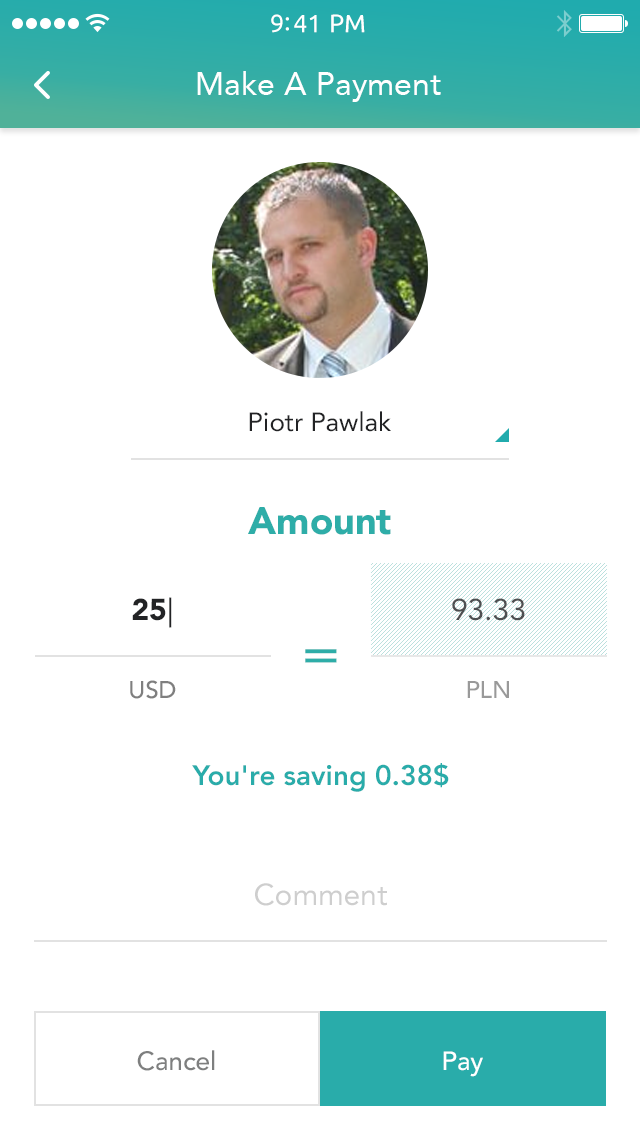
<style>
.page{position:relative;width:640px;height:1136px;background:#ffffff}
.page>*{position:absolute;margin:0}
.t1{font:25px "Ubuntu";color:#ffffff}
.t2{font:32px "Avenir-Roman";color:#ffffff}
.t3{font:26px "Avenir-Roman";color:#222325}
.t4{font:38px "Avenir-Black";color:#2eada8}
.t5{font:24px/78px "Avenir-Medium";color:#7f7f7f}
.t6{font:30px/78px "Avenir-Black";color:#222325}
.t7{font:30px/78px "Avenir-Roman";color:#222325}
.t8{font:30px/30px "Avenir-Roman"}
.t9{font:24px/78px "Avenir-Medium"}
.t10{font:60px "Avenir-Roman";color:#2eada8}
.t11{font:28px "Avenir-Heavy";color:#29acaa}
.t12{font:30px "Avenir-Roman";color:#cecece}
.t13{font:26px "Avenir-Medium";color:#7e7f7f}
.t14{font:26px "Avenir-Medium";color:#ffffff}
</style>
<div class="page">
<p class="t1" style="left:271px;top:14px;width:94px;height:19px">9:41 PM</p>
<p class="t2" style="left:197px;top:71px;width:244px;height:31px">Make A Payment</p>
<p class="t3" style="left:249px;top:411px;width:142px;height:21px">Piotr Pawlak</p>
<p class="t4" style="left:248px;top:507px;width:143px;height:28px">Amount</p>
<p class="t5" style="left:130px;top:597px;width:46px;height:102px;text-align:center"><span class="t6">25</span><span class="t7">|<br></span>USD</p>
<p class="t8" style="left:452px;top:598px;width:73px;height:100px;text-align:center">93.33<br><span class="t9">PLN</span></p>
<p class="t10" style="left:305px;top:649px;width:32px;height:14px">=</p>
<p class="t11" style="left:192px;top:763px;width:257px;height:29px">You're saving 0.38$</p>
<p class="t12" style="left:255px;top:883px;width:132px;height:23px">Comment</p>
<p class="t13" style="left:137px;top:1050px;width:78px;height:21px">Cancel</p>
<p class="t14" style="left:443px;top:1051px;width:40px;height:26px">Pay</p>
</div>
